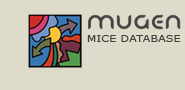
<style>
.page{position:relative;width:185px;height:90px;background:#dedbcb}
.page>*{position:absolute;margin:0}
.t1{font:9.9px "Verdana";letter-spacing:0.02em;color:#42413d;scale:1.11 1}
</style>
<div class="page">
<p class="t1" style="left:87px;top:35px;width:93px;height:7px">MICE DATABASE</p>
</div>
